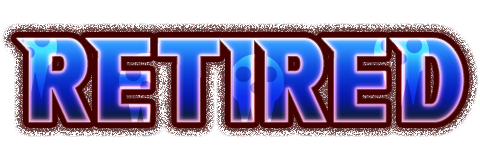
<style>
.page{position:relative;width:480px;height:160px;background:#ffffff}
.page>*{position:absolute;margin:0}
.t1{font:118px "NiseSonicBattle";letter-spacing:0.025em;text-transform:uppercase;scale:0.67 1}
.t2{font:118px "NiseSonicBattle";letter-spacing:-0.025em;text-transform:uppercase;scale:0.67 1}
.t3{font:118px "NiseSonicBattle";letter-spacing:0.075em;text-transform:uppercase;scale:0.67 1}
</style>
<div class="page">
<p class="t1" style="left:16px;top:38px;width:448px;height:84px">R<span class="t2">e</span>tir<span class="t3">ed</span></p>
</div>
